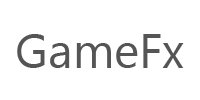
<style>
.page{position:relative;width:200px;height:100px;background:#ffffff}
.page>*{position:absolute;margin:0}
.t1{font:48px "SegoeUI";color:#555555}
</style>
<div class="page">
<p class="t1" style="left:17px;top:34px;width:167px;height:34px">GameFx</p>
</div>
